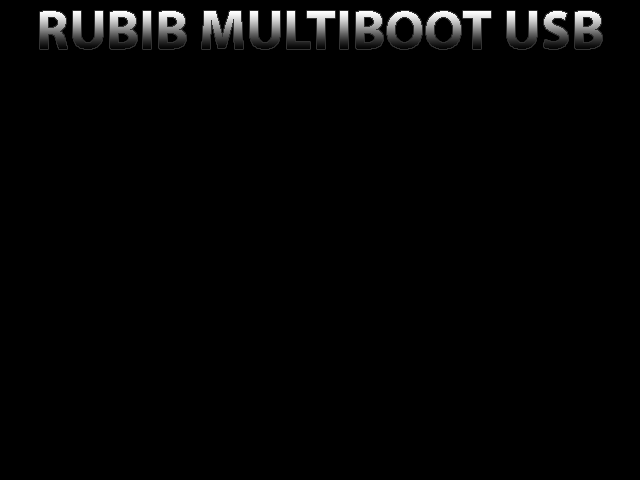
<style>
.page{position:relative;width:640px;height:480px;background:#000000}
.page>*{position:absolute;margin:0}
.t1{font:55px "MyriadPro-Bold"}
</style>
<div class="page">
<p class="t1" style="left:40px;top:11px;width:562px;height:38px">RUBIB MULTIBOOT USB</p>
</div>
